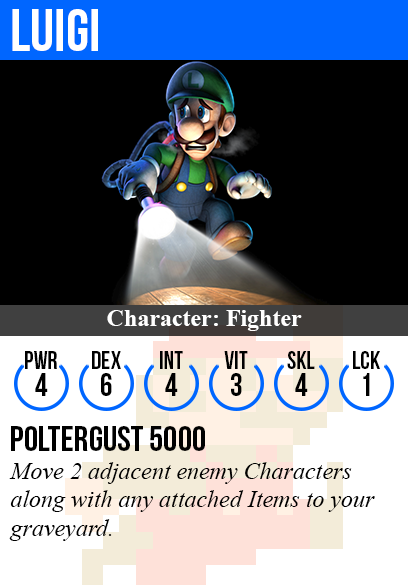
<style>
.page{position:relative;width:408px;height:585px;background:#000000}
.page>*{position:absolute;margin:0}
.t1{font:60px "BebasNeue";color:#ffffff}
.t2{font:24px "TimesNewRomanPS-BoldMT";color:#ffffff}
.t3{font:25px "BebasNeue";color:#000000}
.t4{font:32px "BebasNeue";color:#000000}
.t5{font:36px "BebasNeue";color:#000000}
.t6{font:24px "TimesNewRomanPS-ItalicMT";color:#000000}
</style>
<div class="page">
<p class="t1" style="left:12px;top:9px;width:86px;height:42px">luigi</p>
<p class="t2" style="left:107px;top:310px;width:195px;height:21px">Character: Fighter</p>
<p class="t3" style="left:25px;top:351px;width:32px;height:18px">PWR</p>
<p class="t3" style="left:92px;top:351px;width:29px;height:18px">dex</p>
<p class="t3" style="left:160px;top:351px;width:23px;height:18px">int</p>
<p class="t3" style="left:224px;top:351px;width:24px;height:18px">vit</p>
<p class="t3" style="left:287px;top:351px;width:28px;height:18px">skl</p>
<p class="t3" style="left:353px;top:351px;width:27px;height:18px">lck</p>
<p class="t4" style="left:35px;top:373px;width:13px;height:23px">4</p>
<p class="t4" style="left:101px;top:373px;width:11px;height:23px">6</p>
<p class="t4" style="left:165px;top:373px;width:13px;height:23px">4</p>
<p class="t4" style="left:231px;top:373px;width:11px;height:23px">3</p>
<p class="t4" style="left:295px;top:373px;width:13px;height:23px">4</p>
<p class="t4" style="left:363px;top:373px;width:7px;height:23px">1</p>
<p class="t5" style="left:11px;top:426px;width:194px;height:25px">poltergust 5000</p>
<p class="t6" style="left:9px;top:462px;width:366px;height:79px">Move 2 adjacent enemy Characters<br>along with any attached Items to your<br>graveyard.</p>
</div>
